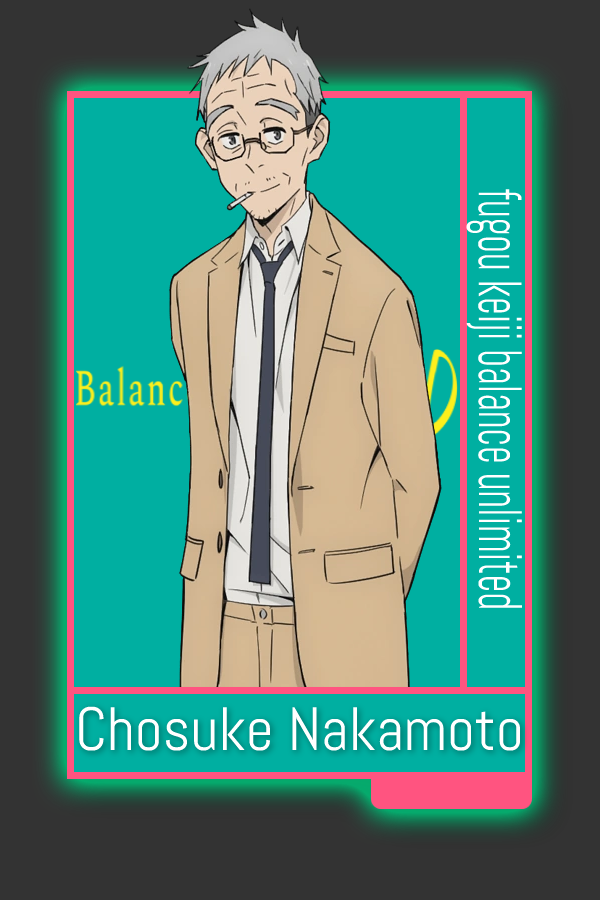
<style>
.page{position:relative;width:600px;height:900px;background:#00afa1}
.page>*{position:absolute;margin:0}
.t1{font:61.1px "Abel-Regular";color:#ffffff;scale:0.64 1}
.t2{font:61px "Abel-Regular";color:#ffffff}
</style>
<div class="page">
<p class="t1" style="left:466px;top:189px;width:56px;height:419px;rotate:90deg">fugou keiji balance unlimited</p>
<p class="t2" style="left:79px;top:706px;width:441px;height:45px">Chosuke Nakamoto</p>
</div>
